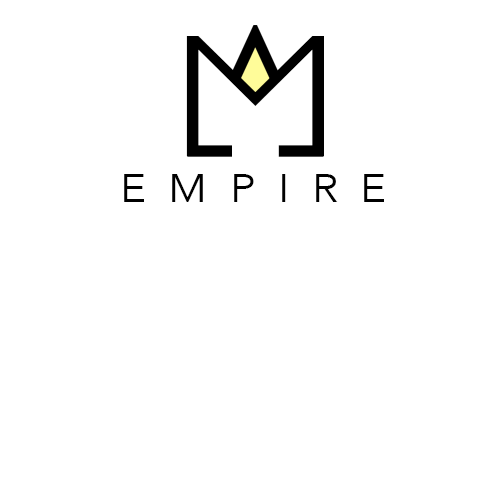
<style>
.page{position:relative;width:500px;height:503px;background:#ffffff}
.page>*{position:absolute;margin:0}
.t1{font:176px "GillSans-Light";letter-spacing:0.17em;color:#000000;text-transform:uppercase;scale:1.25 1}
.t2{font:65.8px "GillSans-Light";letter-spacing:0.17em;color:#000000;text-transform:uppercase;scale:3.34 1}
.t3{font:40px "AvenirNext-Regular";letter-spacing:0.5em;color:#000000;text-transform:uppercase;scale:1.11 1}
</style>
<div class="page">
<p class="t1" style="left:186px;top:36px;width:138px;height:120px">m</p>
<p class="t2" style="left:187px;top:145px;width:45px;height:12px;rotate:-90deg">i</p>
<p class="t2" style="left:278px;top:145px;width:46px;height:12px;rotate:-90deg">i</p>
<p class="t3" style="left:124px;top:174px;width:260px;height:28px">empire</p>
</div>
